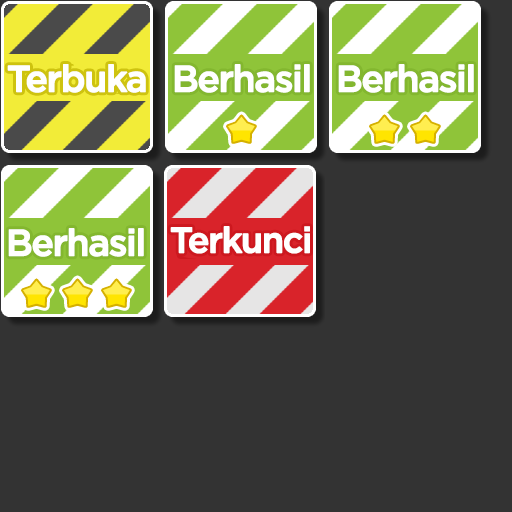
<style>
.page{position:relative;width:512px;height:512px;background:#333333}
.page>*{position:absolute;margin:0}
.t1{font:37px "iCielGotham-Medium";letter-spacing:-0.06em;color:#ffffff;font-weight:bold}
.t2{font:35.7px "iCielGotham-Medium";letter-spacing:-0.06em;color:#ffffff;font-weight:bold}
</style>
<div class="page">
<p class="t1" style="left:7px;top:64px;width:139px;height:29px">Terbuka</p>
<p class="t1" style="left:174px;top:64px;width:136px;height:29px">Berhasil</p>
<p class="t1" style="left:338px;top:64px;width:136px;height:29px">Berhasil</p>
<p class="t1" style="left:8px;top:228px;width:136px;height:29px">Berhasil</p>
<p class="t2" style="left:170px;top:226px;width:140px;height:28px">Terkunci</p>
</div>
